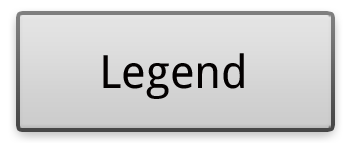
<style>
.page{position:relative;width:347px;height:143px}
.page>*{position:absolute;margin:0}
.t1{font:45.8px "DroidSans";color:#030000}
</style>
<div class="page">
<p class="t1" style="left:103px;top:53px;width:141px;height:46px">Legend</p>
</div>
